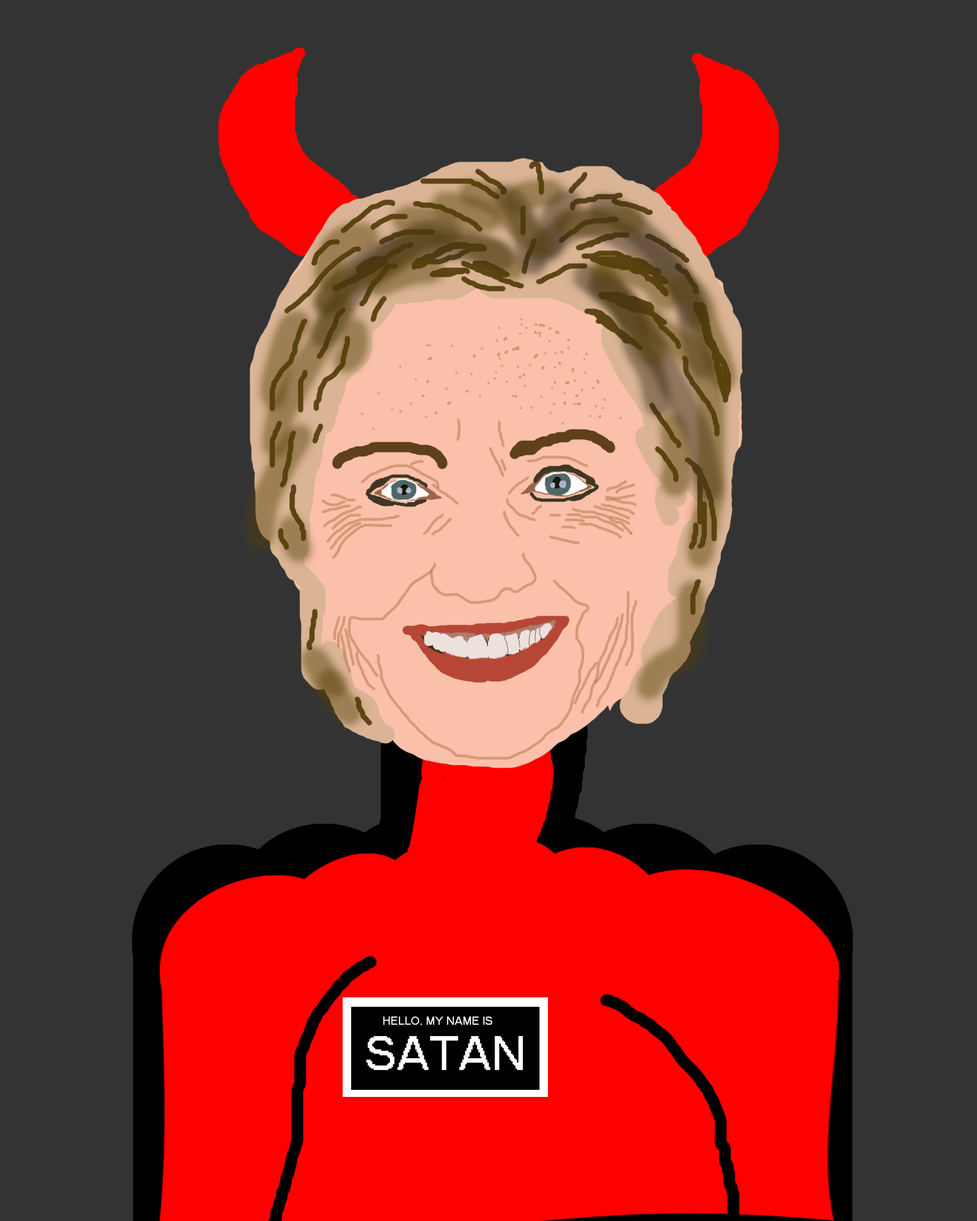
<style>
.page{position:relative;width:977px;height:1221px;background:#333333}
.page>*{position:absolute;margin:0}
.t1{font:11.3px "MS Sans Serif";color:#fefefe}
.t2{font:47.2px "MS Sans Serif";color:#fefefe}
</style>
<div class="page">
<p class="t1" style="left:383px;top:1016px;width:109px;height:10px">HELLO, MY NAME IS</p>
<p class="t2" style="left:366px;top:1036px;width:157px;height:34px">SATAN</p>
</div>
